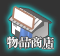
<style>
.page{position:relative;width:60px;height:56px}
.page>*{position:absolute;margin:0}
.t1{font:12px "RyuminPr6N-ExBold";color:#ffffff}
</style>
<div class="page">
<p class="t1" style="left:7px;top:36px;width:47px;height:12px">物品商店</p>
</div>
